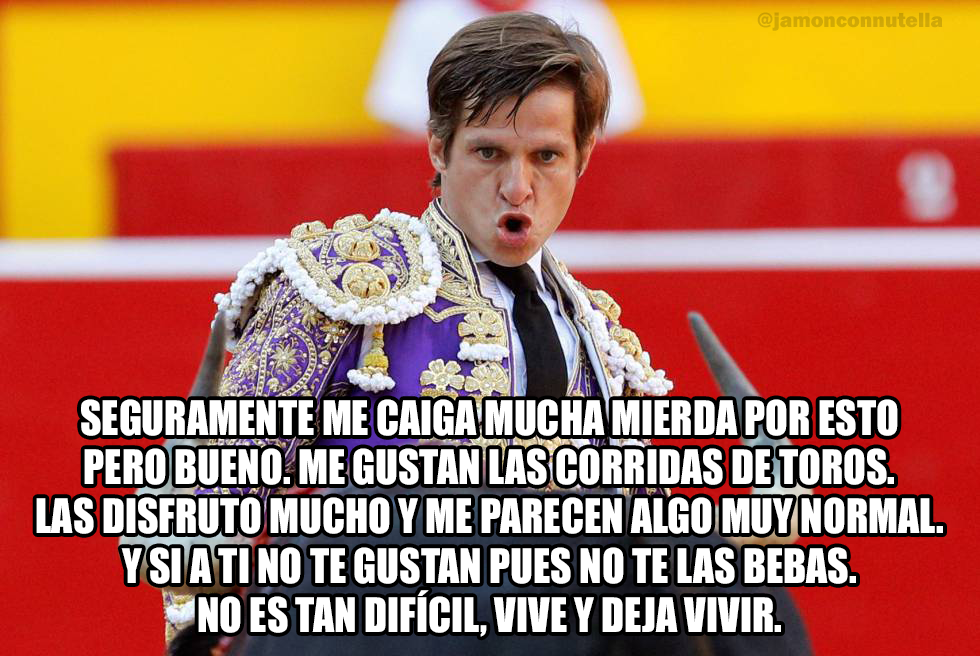
<style>
.page{position:relative;width:980px;height:656px}
.page>*{position:absolute;margin:0}
.t1{font:21.4px "FranklinGothic-Heavy";color:#d0a805}
.t2{font:43.9px "Impact";color:#ffffff;scale:0.95 1}
</style>
<div class="page">
<p class="t1" style="left:757px;top:12px;width:186px;height:19px">@jamonconnutella</p>
<p class="t2" style="left:36px;top:399px;width:907px;height:238px;text-align:center">SEGURAMENTE ME CAIGA MUCHA MIERDA POR ESTO<br>PERO BUENO. ME GUSTAN LAS CORRIDAS DE TOROS.<br>LAS DISFRUTO MUCHO Y ME PARECEN ALGO MUY NORMAL.<br>Y SI A TI NO TE GUSTAN PUES NO TE LAS BEBAS.<br>NO ES TAN DIFÍCIL, VIVE Y DEJA VIVIR.</p>
</div>
